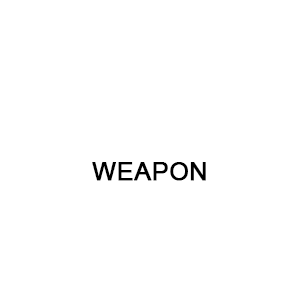
<style>
.page{position:relative;width:300px;height:300px;background:#ffffff}
.page>*{position:absolute;margin:0}
.t1{font:25.4px "ArialMT";color:#000000;font-weight:bold}
</style>
<div class="page">
<p class="t1" style="left:92px;top:162px;width:114px;height:19px">WEAPON</p>
</div>
